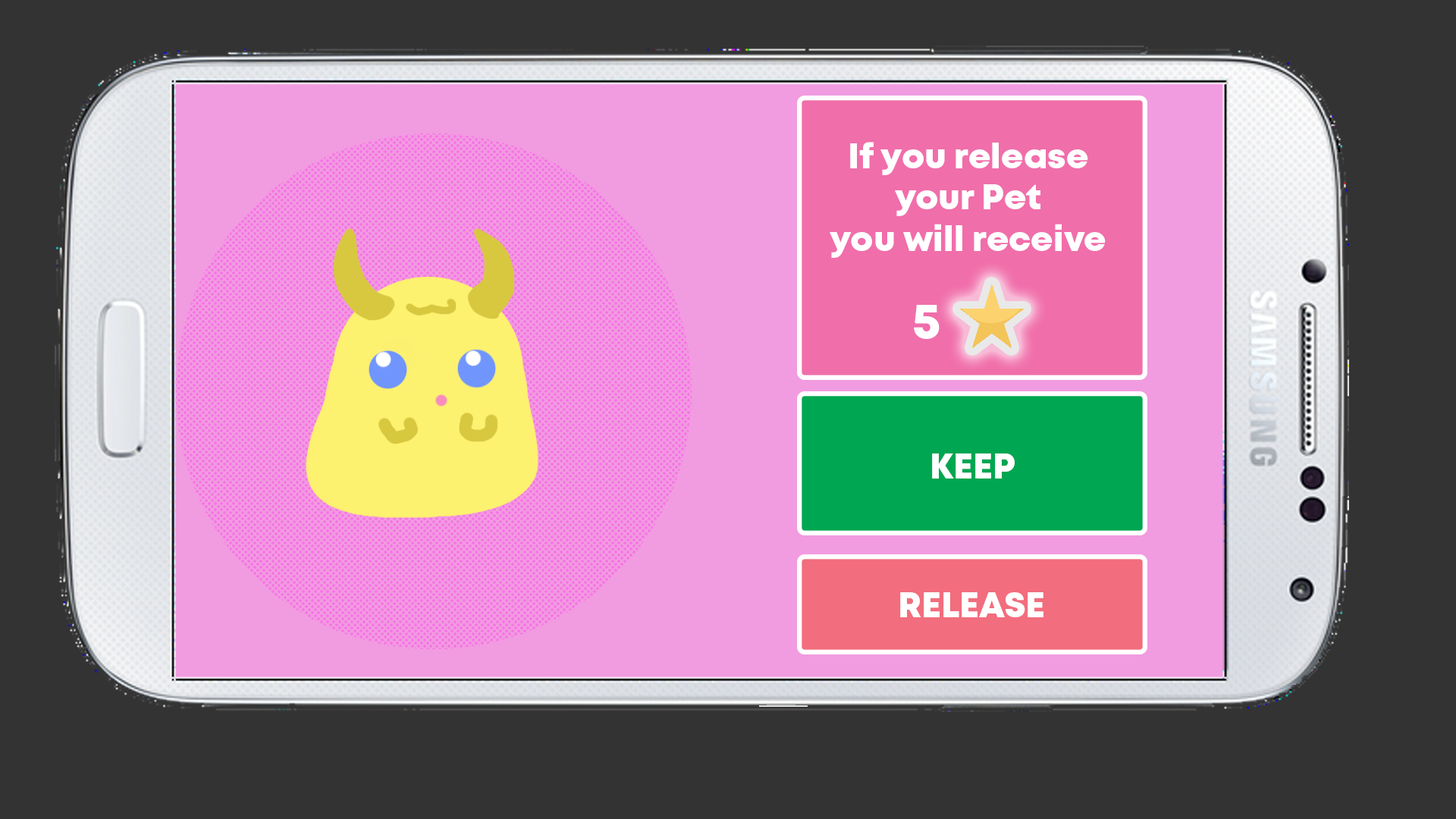
<style>
.page{position:relative;width:1456px;height:819px;background:#333333}
.page>*{position:absolute;margin:0}
.t1{font:34.8px "Mont-HeavyDEMO";color:#ffffff}
.t2{font:50.6px "Mont-HeavyDEMO";color:#ffffff}
</style>
<div class="page">
<p class="t1" style="left:830px;top:142px;width:276px;height:116px;text-align:center">If you release<br>your Pet<br>you will receive</p>
<p class="t2" style="left:914px;top:305px;width:26px;height:34px">5</p>
<p class="t1" style="left:932px;top:453px;width:83px;height:26px">KEEP</p>
<p class="t1" style="left:900px;top:592px;width:143px;height:25px">RELEASE</p>
</div>
